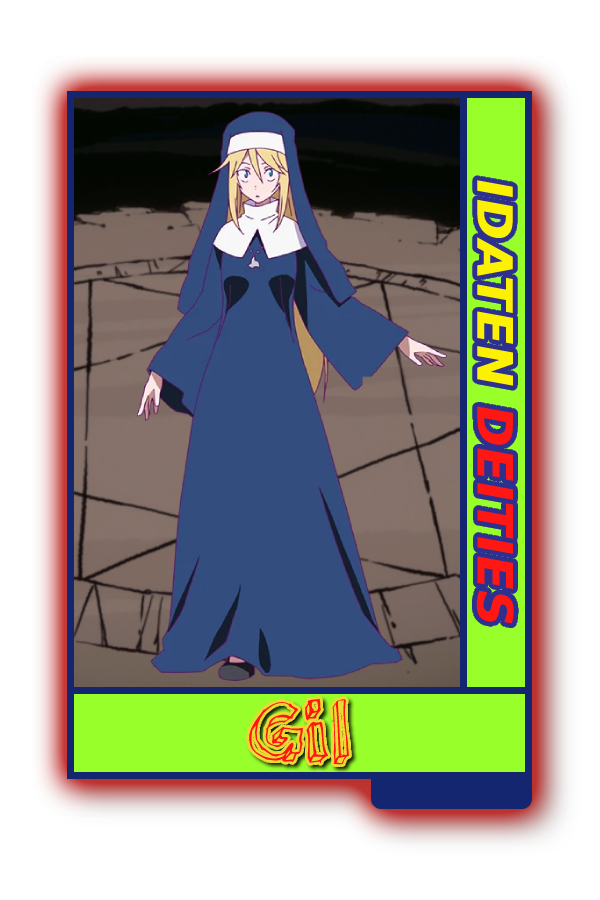
<style>
.page{position:relative;width:600px;height:900px;background:#ffffff}
.page>*{position:absolute;margin:0}
.t1{font:48.8px "MADETOMMY-Bold";color:#ff1713;font-weight:bold;font-style:italic}
.t2{font:48.8px "MADETOMMY-Bold";color:#fdf103;font-weight:bold;font-style:italic}
.t3{font:75px "3dumb";color:#ff1611}
</style>
<div class="page">
<p class="t1" style="left:476px;top:180px;width:38px;height:444px;rotate:90deg"><span class="t2">IDATEN </span>DEITIES</p>
<p class="t3" style="left:248px;top:698px;width:101px;height:67px">Gil</p>
</div>
